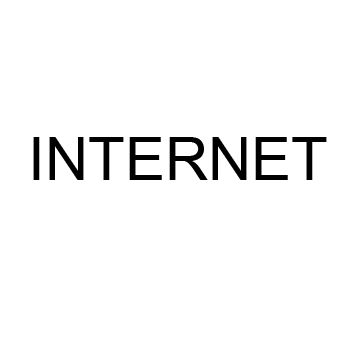
<style>
.page{position:relative;width:360px;height:360px;background:#ffffff}
.page>*{position:absolute;margin:0}
.t1{font:60px "ArialMT";color:#010101}
</style>
<div class="page">
<p class="t1" style="left:33px;top:137px;width:294px;height:43px">INTERNET</p>
</div>
